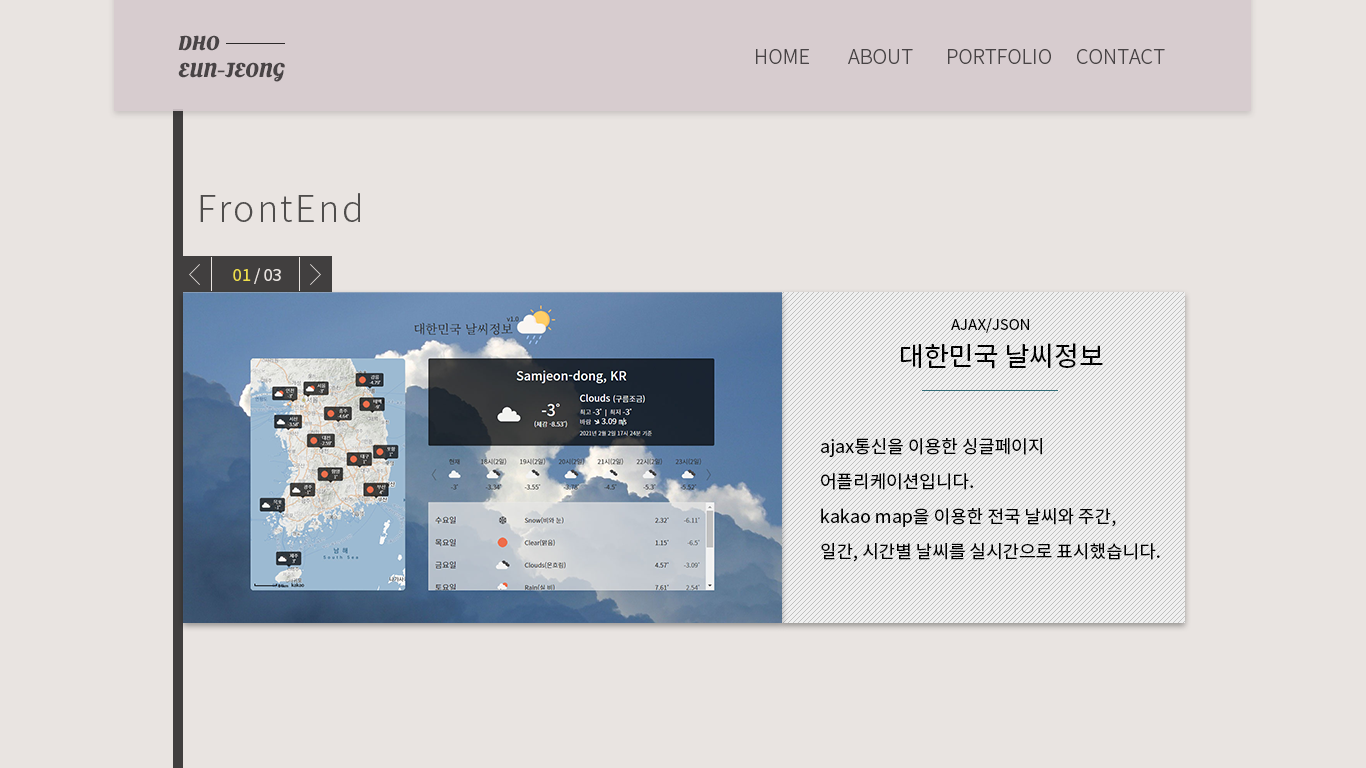
<style>
.page{position:relative;width:1366px;height:768px;background:#e9e4e1}
.page>*{position:absolute;margin:0}
.t1{font:20px/27px "OleoScript-Bold";color:#494446}
.t2{font:20px "NotoSansCJKkr-Light";color:#494446}
.t3{font:36px "NotoSansCJKkr-Light";letter-spacing:0.06em;color:#4f4d4c}
.t4{font:16px "NotoSansCJKkr-Regular";color:#e9e4e1}
.t5{font:16px "NotoSansCJKkr-Regular";color:#eede4c}
.t6{font:15px "NotoSansCJKkr-Regular";color:#000000}
.t7{font:27px "NotoSansCJKkr-Regular";color:#000000}
.t8{font:18px/35px "NotoSansCJKkr-Regular";color:#000000}
</style>
<div class="page">
<p class="t1" style="left:178px;top:35px;width:107px;height:47px">DHO<br>EUN-JEONG</p>
<p class="t2" style="left:756px;top:49px;width:53px;height:15px">HOME</p>
<p class="t2" style="left:848px;top:49px;width:65px;height:15px">ABOUT</p>
<p class="t2" style="left:948px;top:49px;width:103px;height:15px">PORTFOLIO</p>
<p class="t2" style="left:1077px;top:49px;width:88px;height:15px">CONTACT</p>
<p class="t3" style="left:200px;top:193px;width:160px;height:29px">FrontEnd</p>
<p class="t4" style="left:233px;top:268px;width:48px;height:16px"><span class="t5">01</span> / 03</p>
<p class="t6" style="left:951px;top:318px;width:78px;height:15px">AJAX/JSON</p>
<p class="t7" style="left:901px;top:343px;width:202px;height:26px">대한민국 날씨정보</p>
<p class="t8" style="left:821px;top:438px;width:339px;height:124px">ajax통신을 이용한 싱글페이지<br>어플리케이션입니다.<br>kakao map을 이용한 전국 날씨와 주간,<br>일간, 시간별 날씨를 실시간으로 표시했습니다.</p>
</div>
